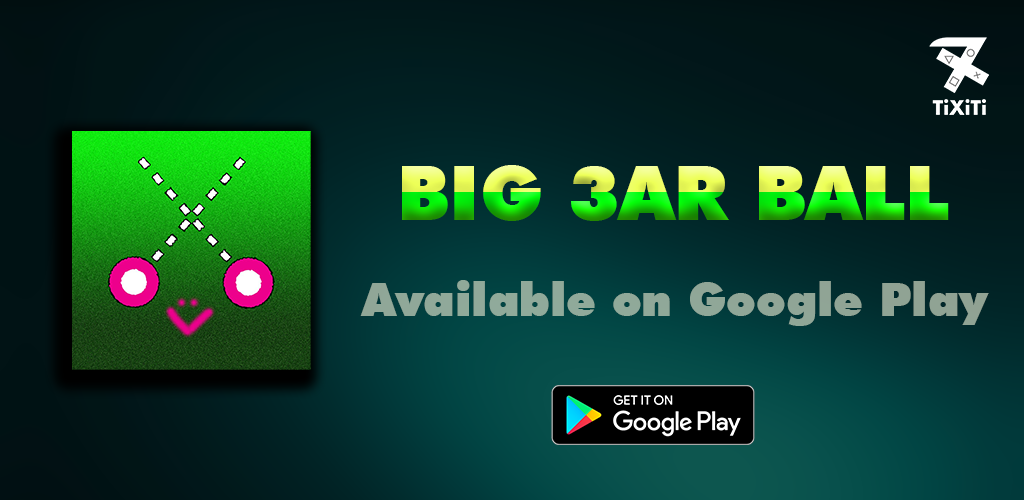
<style>
.page{position:relative;width:1024px;height:500px}
.page>*{position:absolute;margin:0}
.t1{font:75px "FuturaBT-ExtraBlack"}
.t2{font:45.8px "FuturaBT-ExtraBlack";color:#90a798}
</style>
<div class="page">
<p class="t1" style="left:402px;top:165px;width:547px;height:56px">BIG 3AR BALL</p>
<p class="t2" style="left:360px;top:280px;width:629px;height:46px">Available on Google Play</p>
</div>
